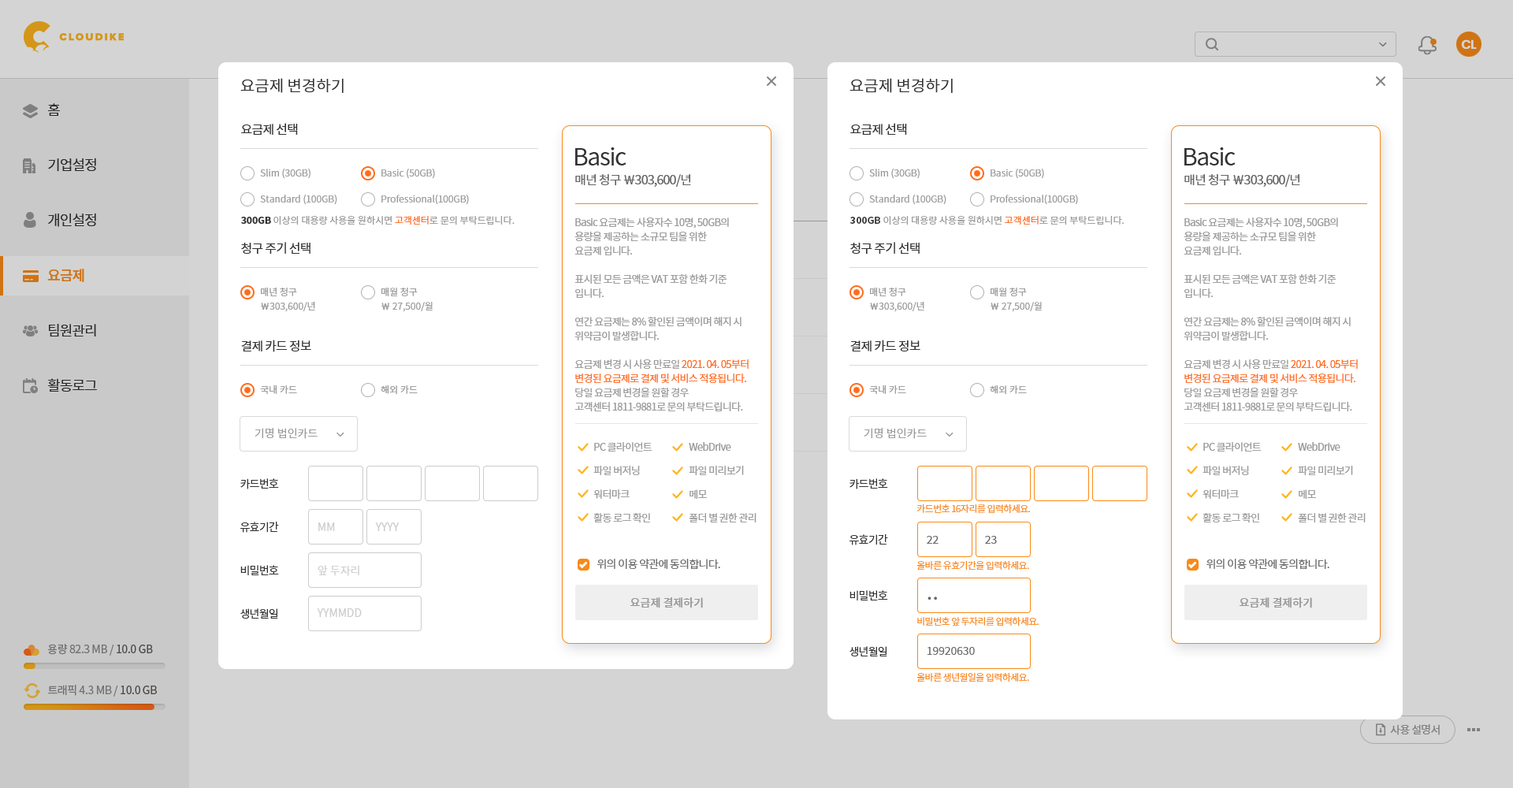
<style>
.page{position:relative;width:1513px;height:788px;background:#ffffff}
.page>*{position:absolute;margin:0}
.t1{font:15.8px "NotoSansCJKkr-DemiLight";color:#333333}
.t2{font:12.6px "NotoSansCJKkr-Regular";letter-spacing:-0.05em;color:#333333}
.t3{font:23.6px "NotoSansCJKkr-Regular";letter-spacing:-0.05em;color:#333333}
.t4{font:9.5px "NotoSansCJKkr-DemiLight";color:#999999}
.t5{font:12.6px "NotoSansCJKkr-Regular";letter-spacing:-0.05em;color:#666666}
.t6{font:9.5px "NotoSansCJKkr-Bold";color:#333333}
.t7{font:9.5px "NotoSansCJKkr-DemiLight";color:#ff6c1a}
.t8{font:10.2px/14.2px "NotoSansCJKkr-Regular";letter-spacing:-0.05em;color:#999999}
.t9{font:10.2px/14.2px "NotoSansCJKkr-Regular";letter-spacing:-0.05em;color:#ff6c1a}
.t10{font:9.5px/14.2px "NotoSansCJKkr-DemiLight";color:#999999}
.t11{font:11px "NotoSansCJKkr-DemiLight";color:#999999}
.t12{font:10.2px/23.6px "NotoSansCJKkr-Regular";letter-spacing:-0.05em;color:#999999}
.t13{font:10.2px/15.8px "NotoSansCJKkr-Regular";letter-spacing:-0.05em;color:#999999}
.t14{font:11px "NotoSansCJKkr-Regular";letter-spacing:-0.05em;color:#333333}
.t15{font:9.5px "NotoSansCJKkr-DemiLight";letter-spacing:-0.05em;color:#f98a17}
.t16{font:11px "NotoSansCJKkr-DemiLight";color:#cecece}
.t17{font:11px "NotoSansCJKkr-DemiLight";color:#666666}
.t18{font:11px "NotoSansCJKkr-DemiLight";letter-spacing:-0.05em;color:#666666}
.t19{font:11px "NotoSansCJKkr-Medium";color:#999999}
.t20{font:22.1px "NotoSansCJKkr-DemiLight";color:#666666}
</style>
<div class="page">
<p class="t1" style="left:240px;top:78px;width:104px;height:15px">요금제 변경하기</p>
<p class="t1" style="left:850px;top:78px;width:103px;height:15px">요금제 변경하기</p>
<p class="t2" style="left:241px;top:123px;width:57px;height:12px">요금제 선택</p>
<p class="t2" style="left:850px;top:123px;width:57px;height:12px">요금제 선택</p>
<p class="t3" style="left:575px;top:147px;width:52px;height:18px">Basic</p>
<p class="t3" style="left:1184px;top:147px;width:52px;height:18px">Basic</p>
<p class="t4" style="left:260px;top:169px;width:51px;height:10px">Slim (30GB)</p>
<p class="t4" style="left:381px;top:169px;width:54px;height:10px">Basic (50GB)</p>
<p class="t4" style="left:869px;top:169px;width:51px;height:10px">Slim (30GB)</p>
<p class="t4" style="left:991px;top:169px;width:53px;height:10px">Basic (50GB)</p>
<p class="t5" style="left:575px;top:174px;width:116px;height:13px">매년 청구 ￦303,600/년</p>
<p class="t5" style="left:1184px;top:174px;width:116px;height:13px">매년 청구 ￦303,600/년</p>
<p class="t4" style="left:260px;top:195px;width:77px;height:10px">Standard (100GB)</p>
<p class="t4" style="left:381px;top:195px;width:88px;height:10px">Professional(100GB)</p>
<p class="t4" style="left:869px;top:195px;width:77px;height:10px">Standard (100GB)</p>
<p class="t4" style="left:991px;top:195px;width:87px;height:10px">Professional(100GB)</p>
<p class="t4" style="left:241px;top:215px;width:274px;height:10px"><span class="t6">300GB</span> 이상의 대용량 사용을 원하시면 <span class="t7">고객센터</span>로 문의 부탁드립니다.</p>
<p class="t8" style="left:575px;top:218px;width:174px;height:194px">Basic 요금제는 사용자수 10명, 50GB의 <br>용량을 제공하는 소규모 팀을 위한 <br>요금제 입니다. <br><br>표시된 모든 금액은 VAT 포함 한화 기준<br>입니다.<br><br>연간 요금제는 8% 할인된 금액이며 해지 시 <br>위약금이 발생합니다.<br><br>요금제 변경 시 사용 만료일 <span class="t9">2021. 04. 05부터 <br>변경된 요금제로 결제 및 서비스 적용됩니다.<br></span>당일 요금제 변경을 원할 경우<br>고객센터 1811-9881로 문의 부탁드립니다.</p>
<p class="t4" style="left:850px;top:215px;width:274px;height:10px"><span class="t6">300GB</span> 이상의 대용량 사용을 원하시면 <span class="t7">고객센터</span>로 문의 부탁드립니다.</p>
<p class="t8" style="left:1184px;top:218px;width:174px;height:194px">Basic 요금제는 사용자수 10명, 50GB의 <br>용량을 제공하는 소규모 팀을 위한 <br>요금제 입니다. <br><br>표시된 모든 금액은 VAT 포함 한화 기준<br>입니다.<br><br>연간 요금제는 8% 할인된 금액이며 해지 시 <br>위약금이 발생합니다. <br><br>요금제 변경 시 사용 만료일 <span class="t9">2021. 04. 05부터 <br>변경된 요금제로 결제 및 서비스 적용됩니다.<br></span>당일 요금제 변경을 원할 경우<br>고객센터 1811-9881로 문의 부탁드립니다.</p>
<p class="t2" style="left:241px;top:242px;width:70px;height:13px">청구 주기 선택</p>
<p class="t2" style="left:850px;top:242px;width:70px;height:13px">청구 주기 선택</p>
<p class="t10" style="left:261px;top:287px;width:54px;height:25px">매년 청구 <br>￦303,600/년</p>
<p class="t10" style="left:381px;top:288px;width:52px;height:24px">매월 청구 <br>￦ 27,500/월</p>
<p class="t10" style="left:870px;top:287px;width:54px;height:25px">매년 청구 <br>￦303,600/년</p>
<p class="t10" style="left:991px;top:288px;width:51px;height:24px">매월 청구 <br>￦ 27,500/월</p>
<p class="t2" style="left:241px;top:340px;width:70px;height:12px">결제 카드 정보</p>
<p class="t2" style="left:850px;top:340px;width:70px;height:12px">결제 카드 정보</p>
<p class="t4" style="left:260px;top:385px;width:37px;height:9px">국내 카드</p>
<p class="t4" style="left:381px;top:385px;width:37px;height:10px">해외 카드</p>
<p class="t4" style="left:869px;top:385px;width:37px;height:9px">국내 카드</p>
<p class="t4" style="left:990px;top:385px;width:37px;height:10px">해외 카드</p>
<p class="t11" style="left:255px;top:428px;width:63px;height:11px">기명 법인카드</p>
<p class="t11" style="left:864px;top:428px;width:63px;height:11px">기명 법인카드</p>
<p class="t12" style="left:593px;top:442px;width:60px;height:81px">PC 클라이언트<br>파일 버저닝<br>워터마크<br>활동 로그 확인</p>
<p class="t12" style="left:689px;top:442px;width:68px;height:80px"><span class="t13">ＷebDrive<br></span>파일 미리보기<br>메모<br>폴더 별 권한 관리</p>
<p class="t12" style="left:1203px;top:442px;width:59px;height:81px">PC 클라이언트<br>파일 버저닝<br>워터마크<br>활동 로그 확인</p>
<p class="t12" style="left:1298px;top:442px;width:68px;height:80px"><span class="t13">ＷebDrive<br></span>파일 미리보기<br>메모<br>폴더 별 권한 관리</p>
<p class="t14" style="left:240px;top:478px;width:39px;height:11px">카드번호</p>
<p class="t14" style="left:850px;top:478px;width:38px;height:11px">카드번호</p>
<p class="t15" style="left:917px;top:504px;width:113px;height:10px">카드번호 16자리를 입력하세요.</p>
<p class="t14" style="left:240px;top:522px;width:39px;height:11px">유효기간</p>
<p class="t16" style="left:318px;top:522px;width:17px;height:9px">MM</p>
<p class="t16" style="left:375px;top:522px;width:25px;height:9px">YYYY</p>
<p class="t14" style="left:850px;top:534px;width:38px;height:11px">유효기간</p>
<p class="t17" style="left:927px;top:536px;width:12px;height:8px">22</p>
<p class="t17" style="left:985px;top:536px;width:12px;height:8px">23</p>
<p class="t14" style="left:240px;top:565px;width:39px;height:10px">비밀번호</p>
<p class="t16" style="left:318px;top:565px;width:41px;height:11px">앞 두자리</p>
<p class="t18" style="left:597px;top:559px;width:123px;height:10px">위의 이용 약관에 동의합니다.</p>
<p class="t15" style="left:917px;top:561px;width:112px;height:10px">올바른 유효기간을 입력하세요.</p>
<p class="t18" style="left:1207px;top:559px;width:122px;height:10px">위의 이용 약관에 동의합니다.</p>
<p class="t14" style="left:850px;top:590px;width:38px;height:11px">비밀번호</p>
<p class="t19" style="left:630px;top:597px;width:73px;height:11px">요금제 결제하기</p>
<p class="t20" style="left:928px;top:597px;width:9px;height:3px">..</p>
<p class="t19" style="left:1240px;top:597px;width:72px;height:11px">요금제 결제하기</p>
<p class="t14" style="left:240px;top:608px;width:38px;height:11px">생년월일</p>
<p class="t16" style="left:317px;top:608px;width:45px;height:9px">YYMMDD</p>
<p class="t15" style="left:917px;top:617px;width:122px;height:10px">비밀번호 앞 두자리를 입력하세요.</p>
<p class="t14" style="left:850px;top:646px;width:37px;height:10px">생년월일</p>
<p class="t17" style="left:927px;top:647px;width:48px;height:8px">19920630</p>
<p class="t15" style="left:917px;top:672px;width:112px;height:10px">올바른 생년월일을 입력하세요.</p>
</div>
